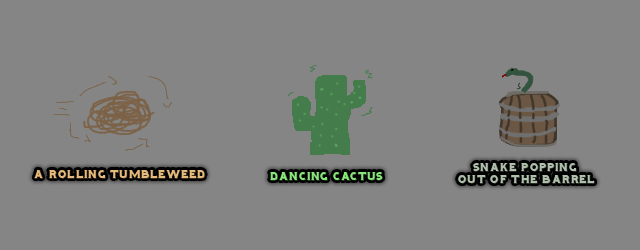
<style>
.page{position:relative;width:640px;height:250px;background:#858585}
.page>*{position:absolute;margin:0}
.t1{font:10px "Hominis";color:#e6ba7b}
.t2{font:10px "Hominis";color:#88e67b}
.t3{font:10px "Hominis";color:#b1c0ad}
</style>
<div class="page">
<p class="t1" style="left:34px;top:170px;width:172px;height:10px">A rolling tumbleweed</p>
<p class="t2" style="left:270px;top:172px;width:114px;height:10px">Dancing cactus</p>
<p class="t3" style="left:458px;top:163px;width:137px;height:22px;text-align:center">Snake popping <br>out of the Barrel</p>
</div>
